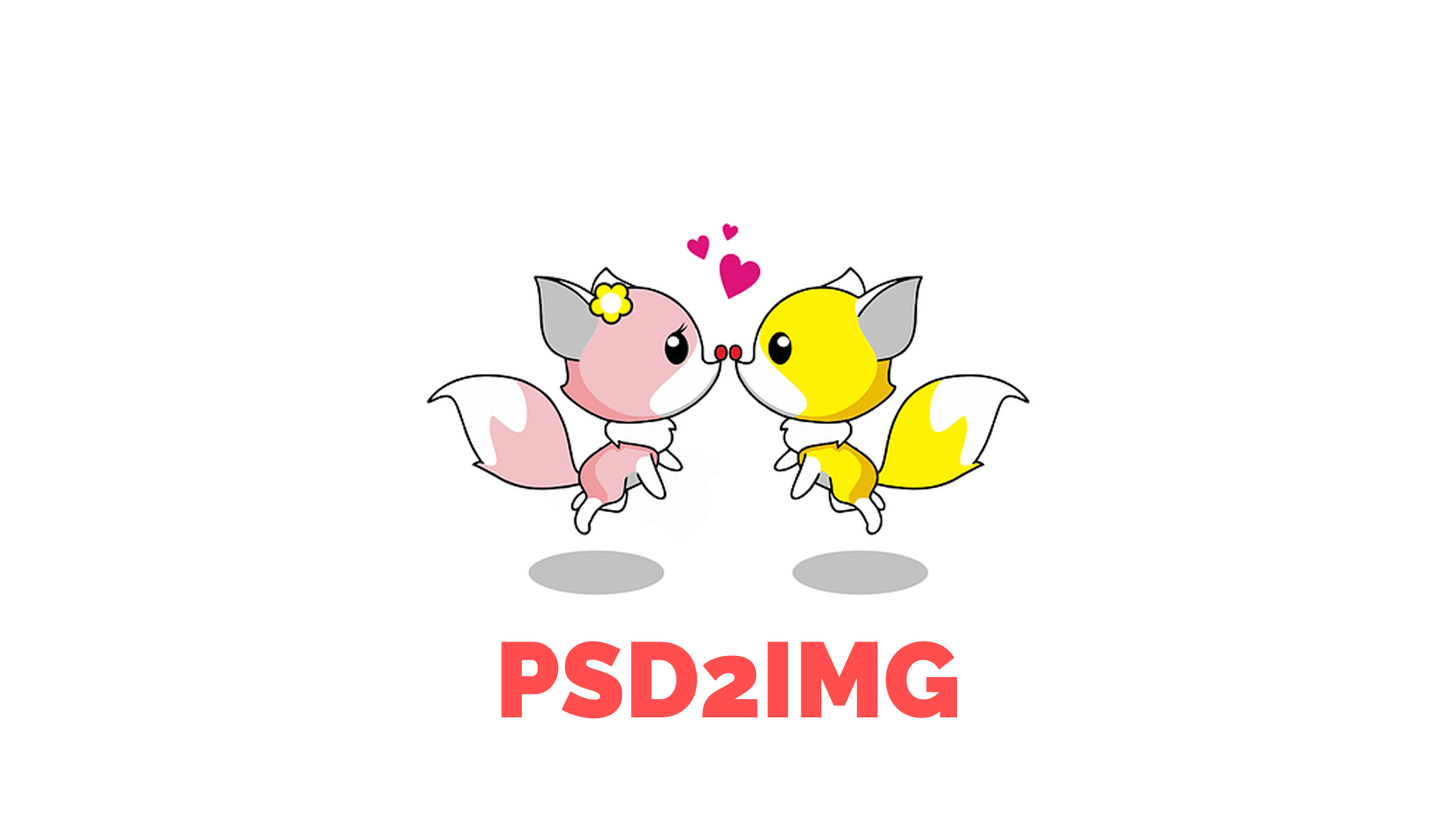
<style>
.page{position:relative;width:1456px;height:819px;background:#ffffff}
.page>*{position:absolute;margin:0}
.t1{font:106.4px "Raleway-Black";color:#ff4e4d}
</style>
<div class="page">
<p class="t1" style="left:501px;top:641px;width:456px;height:78px">PSD2IMG</p>
</div>
